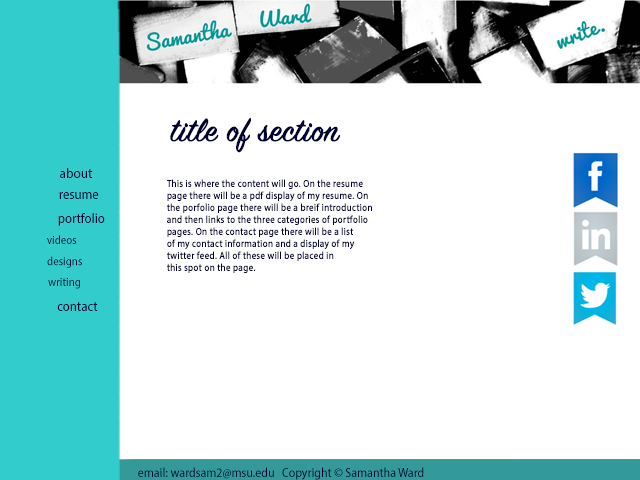
<style>
.page{position:relative;width:640px;height:480px;background:#ffffff}
.page>*{position:absolute;margin:0}
.t1{font:36px "SignPainter-HouseScript";color:#000033;font-weight:bold}
.t2{font:14px "MyriadPro-SemiCn";color:#000033;scale:1.03 1}
.t3{font:10px/12px "MyriadPro-SemiCn";color:#000033;font-weight:bold}
.t4{font:14px "MyriadPro-SemiCn";color:#000033}
.t5{font:12px "MyriadPro-SemiCn";color:#000033}
.t6{font:13px "MyriadPro-SemiCn";color:#000033}
</style>
<div class="page">
<p class="t1" style="left:170px;top:117px;width:170px;height:36px">title of section</p>
<p class="t2" style="left:60px;top:168px;width:33px;height:10px">about</p>
<p class="t3" style="left:167px;top:179px;width:205px;height:94px">This is where the content will go. On the resume <br>page there will be a pdf display of my resume. On<br>the porfolio page there will be a breif introduction<br>and then links to the three categories of portfolio<br>pages. On the contact page there will be a list <br>of my contact information and a display of my<br>twitter feed. All of these will be placed in <br>this spot on the page.</p>
<p class="t4" style="left:59px;top:192px;width:40px;height:7px">resume</p>
<p class="t4" style="left:58px;top:213px;width:47px;height:13px">portfolio</p>
<p class="t5" style="left:47px;top:235px;width:30px;height:9px">videos</p>
<p class="t5" style="left:47px;top:256px;width:35px;height:12px">designs</p>
<p class="t5" style="left:48px;top:278px;width:32px;height:11px">writing</p>
<p class="t4" style="left:57px;top:302px;width:41px;height:9px">contact</p>
<p class="t6" style="left:138px;top:467px;width:286px;height:13px">email: wardsam2@msu.edu   Copyright © Samantha Ward</p>
</div>
